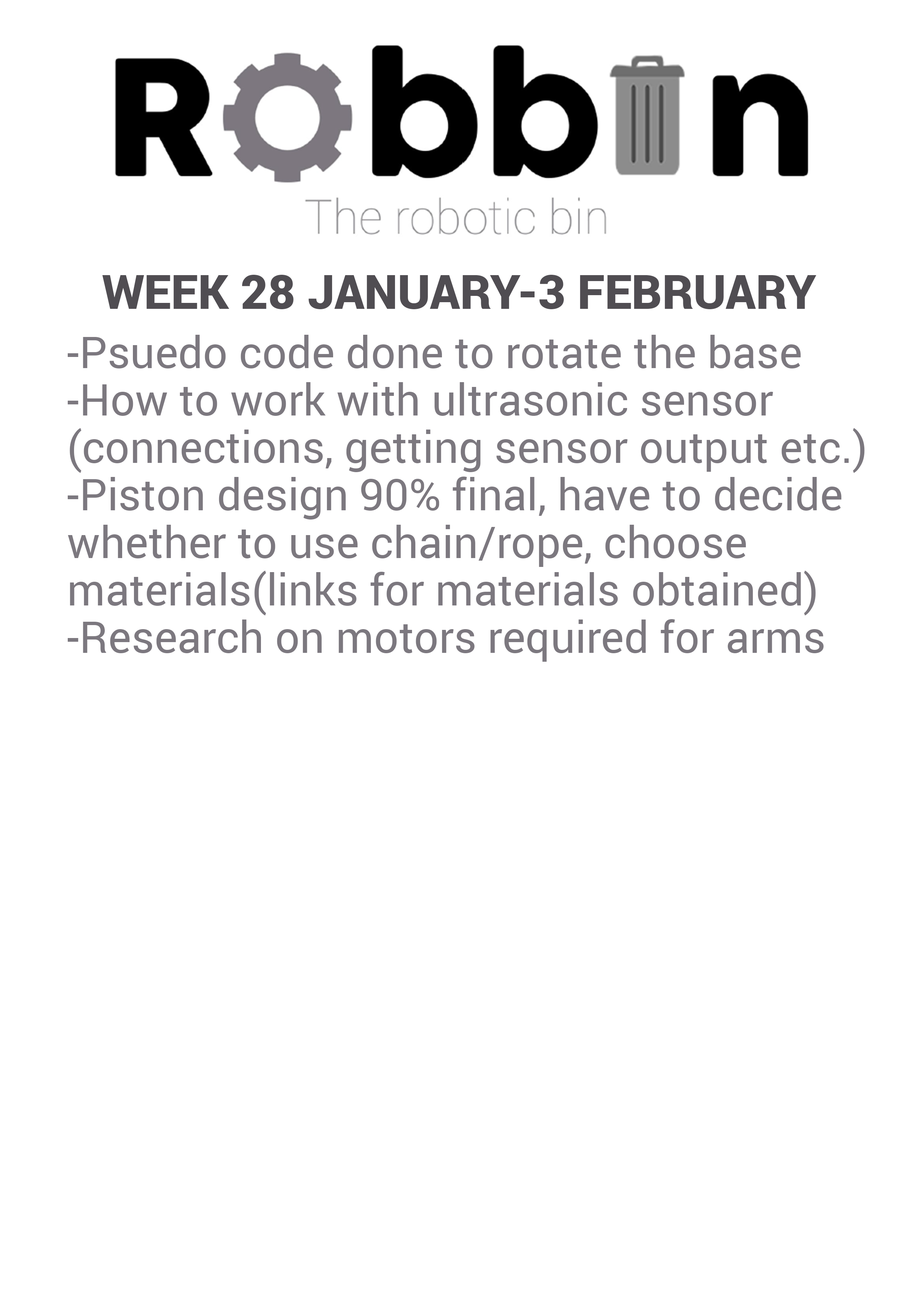
<style>
.page{position:relative;width:918px;height:1299px;background:#ffffff}
.page>*{position:absolute;margin:0}
.t1{font:47.4px "Roboto-Black";color:#504d52;text-transform:uppercase}
.t2{font:43.8px/47.4px "Roboto-Regular";color:#7c787f}
</style>
<div class="page">
<p class="t1" style="left:102px;top:275px;width:715px;height:34px">Week 28 January-3 february</p>
<p class="t2" style="left:68px;top:335px;width:797px;height:327px">-Psuedo code done to rotate the base<br>-How to work with ultrasonic sensor<br>(connections, getting sensor output etc.)<br>-Piston design 90% final, have to decide <br>whether to use chain/rope, choose <br>materials(links for materials obtained)<br>-Research on motors required for arms</p>
</div>
